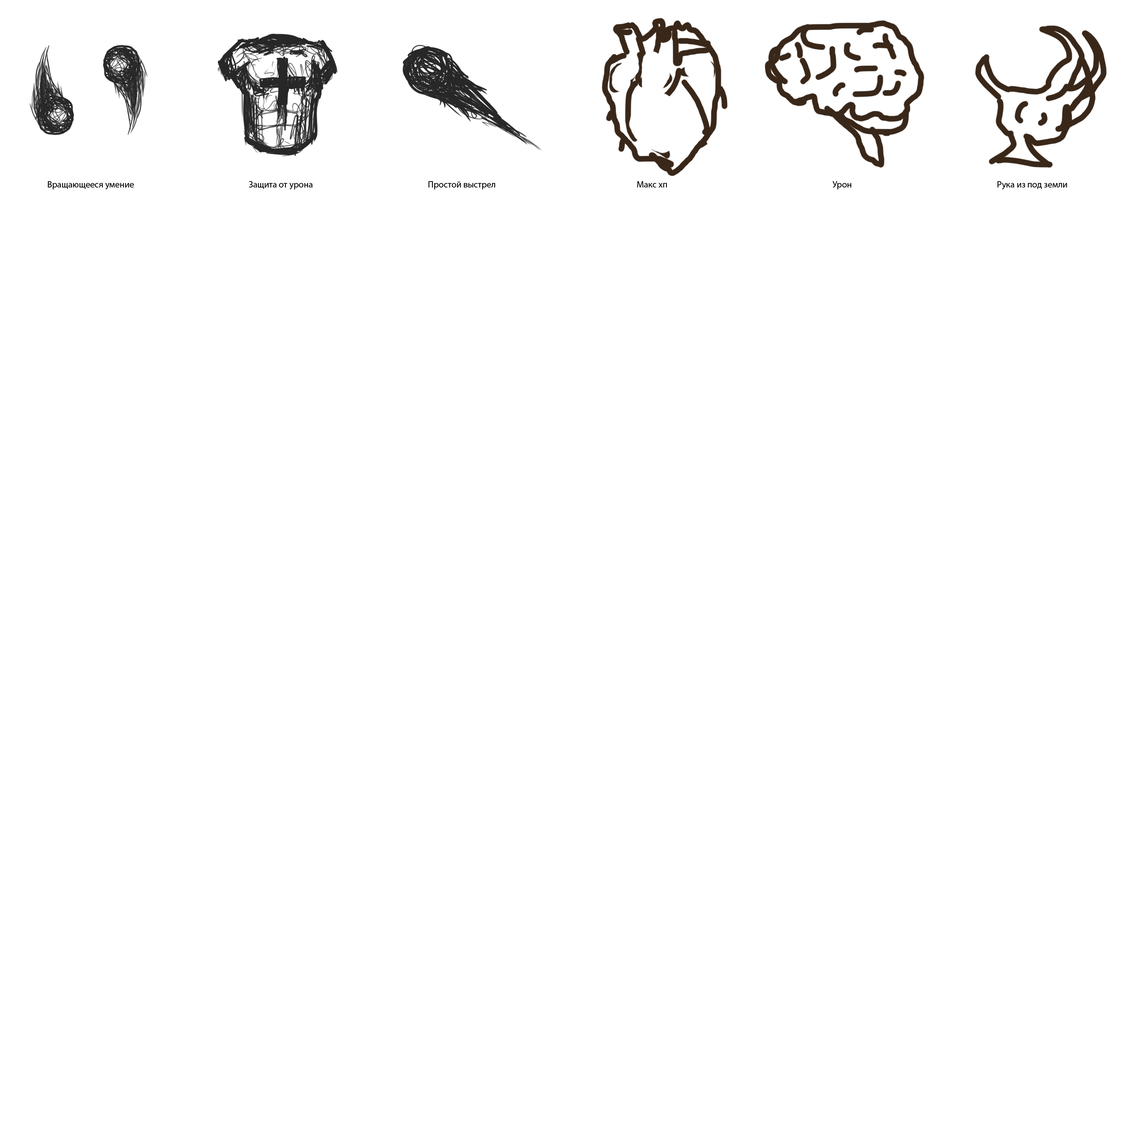
<style>
.page{position:relative;width:1125px;height:1125px;background:#ffffff}
.page>*{position:absolute;margin:0}
.t1{font:9px "MyriadPro-Regular";color:#000000}
</style>
<div class="page">
<p class="t1" style="left:48px;top:181px;width:86px;height:8px">Вращающееся умение</p>
<p class="t1" style="left:249px;top:181px;width:64px;height:8px">Защита от урона</p>
<p class="t1" style="left:428px;top:181px;width:67px;height:8px">Простой выстрел</p>
<p class="t1" style="left:637px;top:181px;width:30px;height:7px">Макс хп</p>
<p class="t1" style="left:832px;top:181px;width:19px;height:8px">Урон</p>
<p class="t1" style="left:998px;top:181px;width:69px;height:8px">Рука из под земли</p>
</div>
